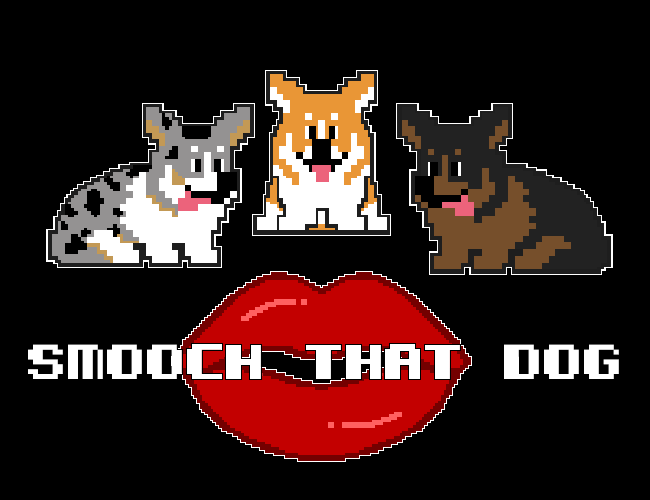
<style>
.page{position:relative;width:650px;height:500px;background:#000000}
.page>*{position:absolute;margin:0}
.t1{font:50px "KemcoPixelBold";color:#ffffff}
</style>
<div class="page">
<p class="t1" style="left:28px;top:344px;width:591px;height:35px">Smooch That Dog</p>
</div>
